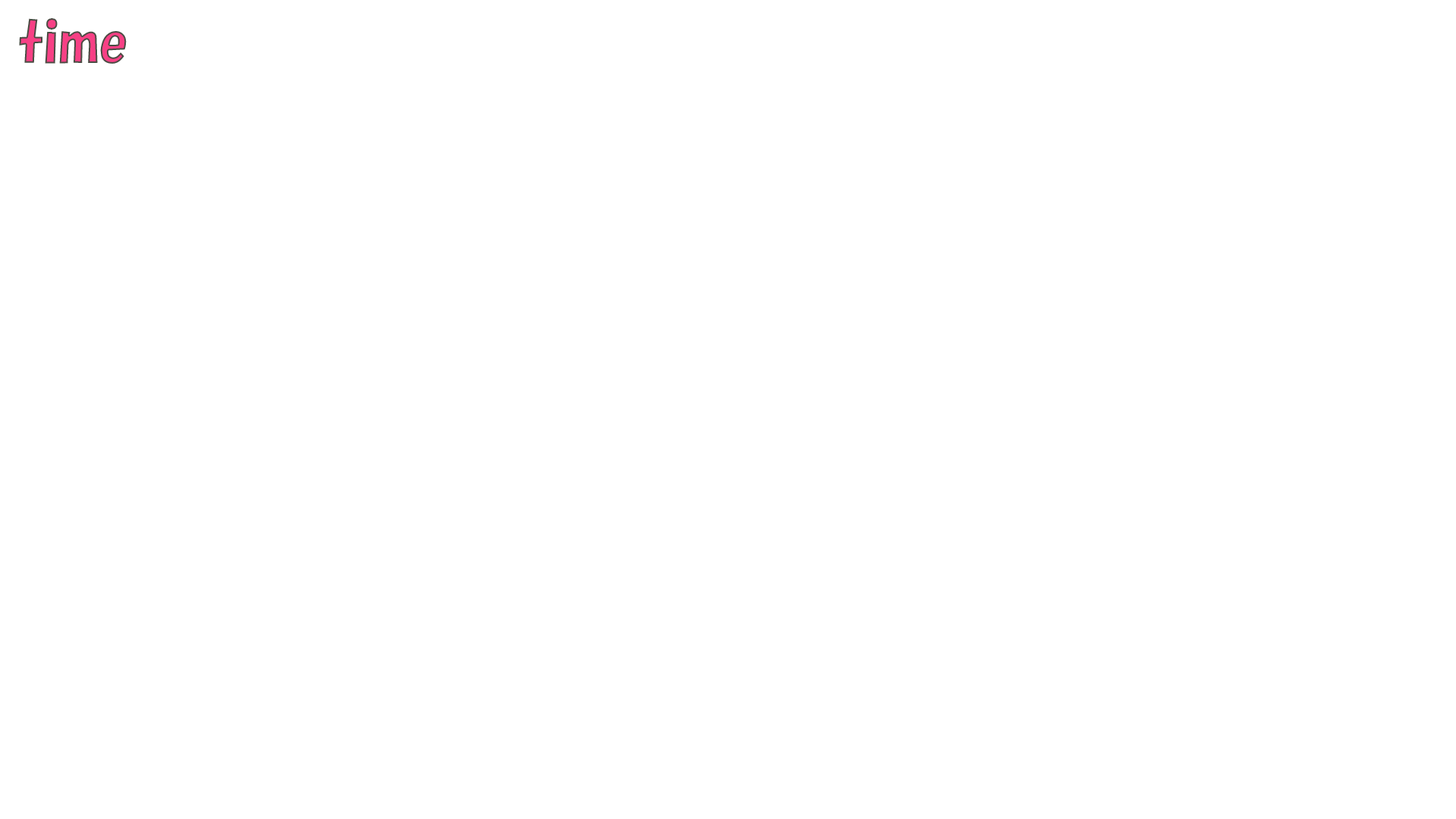
<style>
.page{position:relative;width:1456px;height:819px;background:#ffffff}
.page>*{position:absolute;margin:0}
.t1{font:54.6px "HGPSoeiKakupoptai"}
</style>
<div class="page">
<p class="t1" style="left:19px;top:18px;width:108px;height:46px">time</p>
</div>
